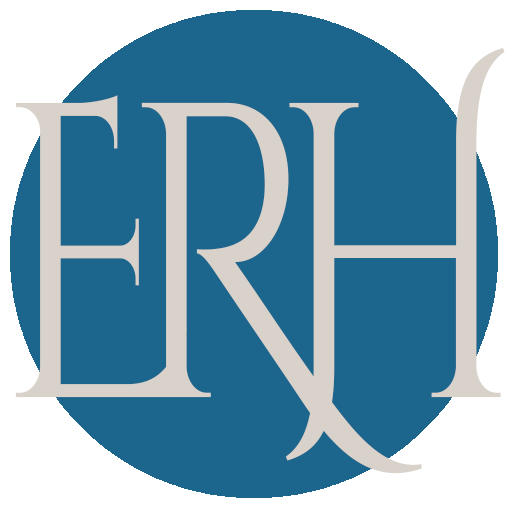
<style>
.page{position:relative;width:512px;height:512px;background:#1c658c}
.page>*{position:absolute;margin:0}
.t1{font:420px "CinzelDecorative-Regular";letter-spacing:-0.195em;color:#d8d2cb;scale:0.75 1}
</style>
<div class="page">
<p class="t1" style="left:15px;top:47px;width:490px;height:427px">ERH</p>
</div>
